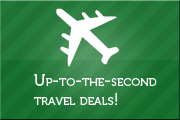
<style>
.page{position:relative;width:180px;height:120px}
.page>*{position:absolute;margin:0}
.t1{font:16px "Museo500-Regular";color:#ffffff;font-variant:small-caps}
</style>
<div class="page">
<p class="t1" style="left:34px;top:74px;width:123px;height:31px">Up-to-the-second<br>travel deals!</p>
</div>
